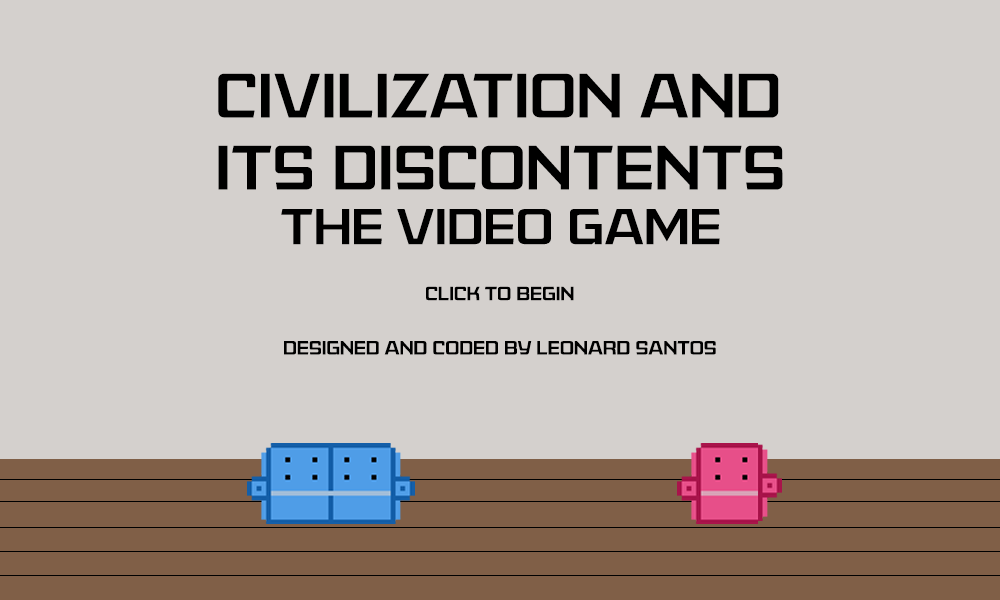
<style>
.page{position:relative;width:1000px;height:600px;background:#d4d0cd}
.page>*{position:absolute;margin:0}
.t1{font:60px "AmericanCaptainPatrius02FRE";color:#000000}
.t2{font:48px "AmericanCaptainPatrius02FRE";color:#000000}
.t3{font:18px "AmericanCaptainPatrius02FRE";color:#000000}
</style>
<div class="page">
<p class="t1" style="left:218px;top:73px;width:565px;height:117px">civilization and<br>its discontents</p>
<p class="t2" style="left:281px;top:209px;width:439px;height:36px">the video game</p>
<p class="t3" style="left:426px;top:286px;width:148px;height:15px">click to begin</p>
<p class="t3" style="left:284px;top:341px;width:432px;height:14px">designed and coded by leonard santos</p>
</div>
